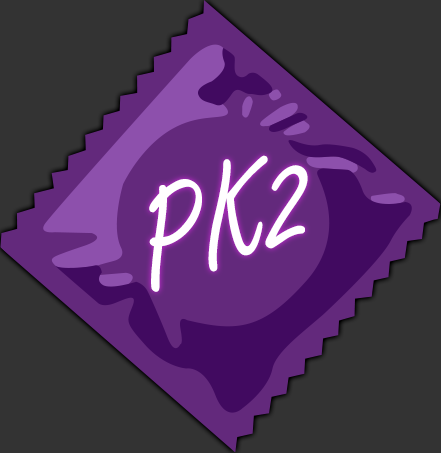
<style>
.page{position:relative;width:441px;height:453px;background:#333333}
.page>*{position:absolute;margin:0}
.t1{font:147.8px "FreestyleScript-Regular";color:#ffffff}
</style>
<div class="page">
<p class="t1" style="left:149px;top:155px;width:159px;height:137px;rotate:-19deg">PK2</p>
</div>
